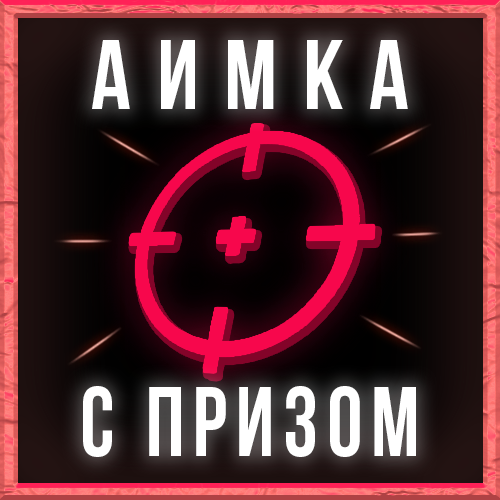
<style>
.page{position:relative;width:500px;height:500px}
.page>*{position:absolute;margin:0}
.t1{font:98px "BebasNeueBold";letter-spacing:0.26em;color:#ffffff}
.t2{font:98px "BebasNeueBold";letter-spacing:0.1em;color:#ffffff;scale:0.91 1}
</style>
<div class="page">
<p class="t1" style="left:92px;top:40px;width:316px;height:69px">аимка</p>
<p class="t2" style="left:83px;top:386px;width:333px;height:71px">с призом</p>
</div>
